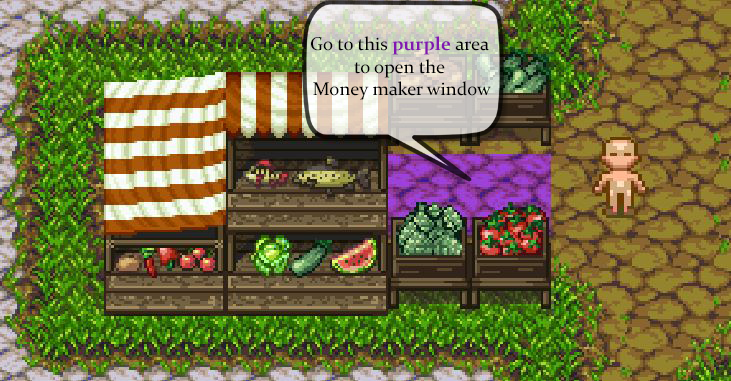
<style>
.page{position:relative;width:731px;height:381px}
.page>*{position:absolute;margin:0}
.t1{font:18.7px "Constantia";color:#000000}
.t2{font:18.7px "Constantia-Bold";color:#8217b1}
</style>
<div class="page">
<p class="t1" style="left:311px;top:36px;width:180px;height:64px;text-align:center">Go to this <span class="t2">purple</span> area <br>to open the <br>Money maker window</p>
</div>
